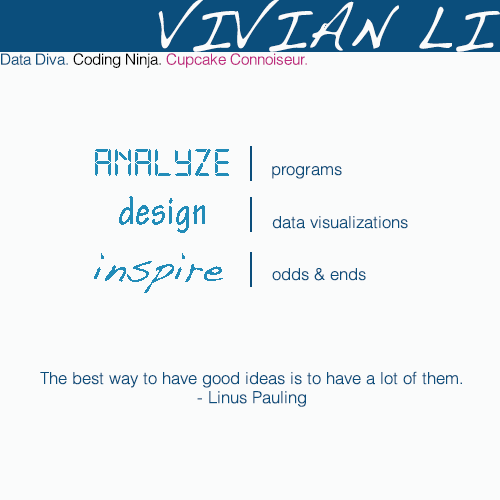
<style>
.page{position:relative;width:500px;height:500px;background:#fafbfb}
.page>*{position:absolute;margin:0}
.t1{font:58.3px "Handwriting-Dakota";color:#fafbfb}
.t2{font:15.2px "Helvetica-Light";color:#be2a7e}
.t3{font:15.2px "Helvetica-Light";color:#0b4e7c}
.t4{font:15.2px "Helvetica-Light";color:#010000}
.t5{font:41.7px "Digital-7";color:#228cb8}
.t6{font:16.7px "Helvetica-Light";color:#0b4e7c}
.t7{font:41.7px "TektonPro-BoldCond";color:#228cb8}
.t8{font:41.7px "Handwriting-Dakota";color:#228cb8}
.t9{font:16.7px/19.2px "Helvetica-Light";color:#0b4e7c}
</style>
<div class="page">
<p class="t1" style="left:158px;top:0px;width:342px;height:52px">VIVIAN LI</p>
<p class="t2" style="left:1px;top:53px;width:306px;height:15px"><span class="t3">Data Diva. </span><span class="t4">Coding Ninja. </span>Cupcake Connoiseur.</p>
<p class="t5" style="left:95px;top:149px;width:134px;height:27px">analyze</p>
<p class="t6" style="left:272px;top:166px;width:70px;height:13px">programs</p>
<p class="t7" style="left:119px;top:196px;width:86px;height:37px">design</p>
<p class="t6" style="left:272px;top:216px;width:136px;height:13px">data visualizations</p>
<p class="t8" style="left:94px;top:253px;width:129px;height:40px">inspire</p>
<p class="t6" style="left:272px;top:268px;width:94px;height:13px">odds &amp; ends</p>
<p class="t9" style="left:40px;top:371px;width:422px;height:36px;text-align:center">The best way to have good ideas is to have a lot of them.<br>- Linus Pauling</p>
</div>
